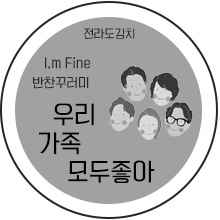
<style>
.page{position:relative;width:220px;height:220px;background:#a1a1a1}
.page>*{position:absolute;margin:0}
.t1{font:11px "KoreanYNSJG3-R";color:#262626}
.t2{font:12px/19.8px "KoreanYNSJG3-R";color:#262626}
.t3{font:23px/28.6px "KoreanYNSJG3-R";color:#000000}
</style>
<div class="page">
<p class="t1" style="left:84px;top:28px;width:51px;height:11px">전라도김치</p>
<p class="t2" style="left:33px;top:57px;width:57px;height:32px">I,m Fine<br>반찬꾸러미</p>
<p class="t3" style="left:39px;top:103px;width:116px;height:80px">우리<br>가족<br>    모두좋아</p>
</div>
